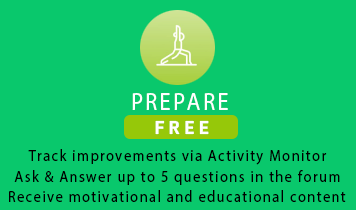
<style>
.page{position:relative;width:356px;height:210px;background:#09c86c}
.page>*{position:absolute;margin:0}
.t1{font:25px "MyriadPro-Regular";letter-spacing:0.1em;color:#ffffff;scale:0.9 1}
.t2{font:18.4px "Bahnschrift-BoldSemiCondensed";letter-spacing:0.2em;color:#ffffff;scale:1.15 1}
.t3{font:16px "MyriadPro-Regular";letter-spacing:0.1em;color:#000000;scale:0.9 1}
</style>
<div class="page">
<p class="t1" style="left:132px;top:93px;width:96px;height:17px">PREPARE</p>
<p class="t2" style="left:155px;top:120px;width:54px;height:15px">FREE</p>
<p class="t3" style="left:28px;top:149px;width:299px;height:16px">Track improvements via Activity Monitor</p>
<p class="t3" style="left:14px;top:170px;width:326px;height:15px">Ask &amp; Answer up to 5 questions in the forum</p>
<p class="t3" style="left:9px;top:190px;width:337px;height:12px">Receive motivational and educational content</p>
</div>
